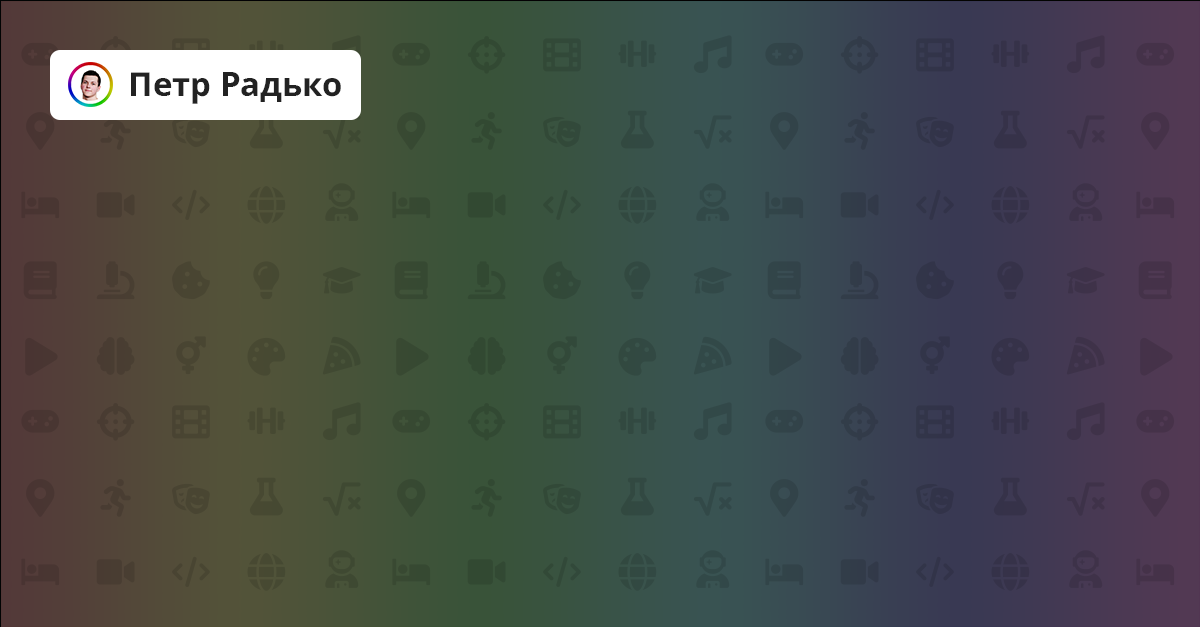
<style>
.page{position:relative;width:1200px;height:627px}
.page>*{position:absolute;margin:0}
.t1{font:32.8px "OpenSans-Bold";color:#222222}
</style>
<div class="page">
<p class="t1" style="left:131px;top:72px;width:210px;height:32px">Петр Радько</p>
</div>
